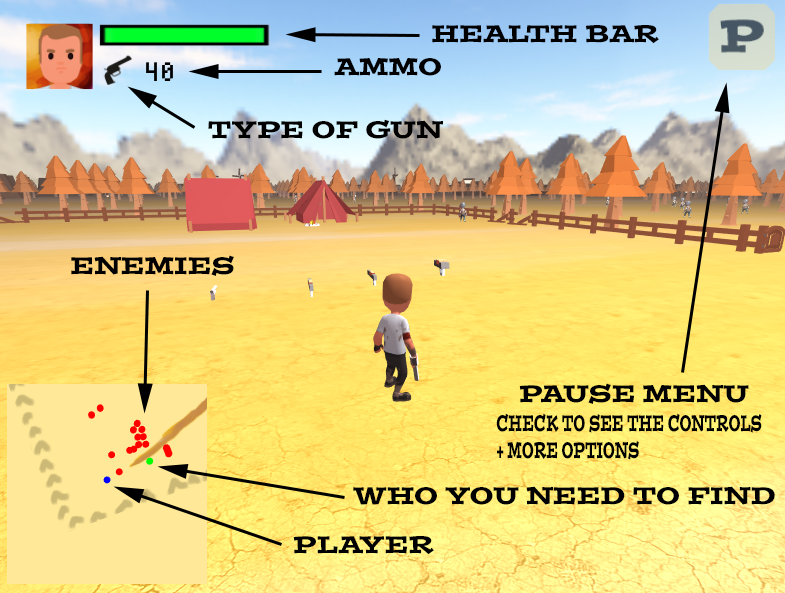
<style>
.page{position:relative;width:785px;height:593px}
.page>*{position:absolute;margin:0}
.t1{font:24px "PostinoStd";color:#000000}
.t2{font:22.4px "PostinoStd";color:#000000;scale:0.53 1}
</style>
<div class="page">
<p class="t1" style="left:432px;top:25px;width:227px;height:19px">HEALTH BAR</p>
<p class="t1" style="left:334px;top:58px;width:107px;height:18px">AMMO</p>
<p class="t1" style="left:208px;top:119px;width:235px;height:20px">TYPE OF GUN</p>
<p class="t1" style="left:71px;top:255px;width:163px;height:21px">ENEMIES</p>
<p class="t1" style="left:519px;top:383px;width:230px;height:21px">PAUSE MENU</p>
<p class="t2" style="left:496px;top:413px;width:266px;height:47px">CHECK TO SEE THE CONTROLS <br>+ MORE OPTIONS</p>
<p class="t1" style="left:353px;top:486px;width:422px;height:19px">WHO YOU NEED TO FIND</p>
<p class="t1" style="left:293px;top:536px;width:141px;height:19px">PLAYER</p>
</div>
